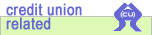
<style>
.page{position:relative;width:152px;height:35px;background:#defab6}
.page>*{position:absolute;margin:0}
.t1{font:16px/14px "ArialNarrow";letter-spacing:0.02em;color:#6568d3;font-weight:bold}
</style>
<div class="page">
<p class="t1" style="left:6px;top:3px;width:76px;height:27px">credit union<br>related</p>
</div>
